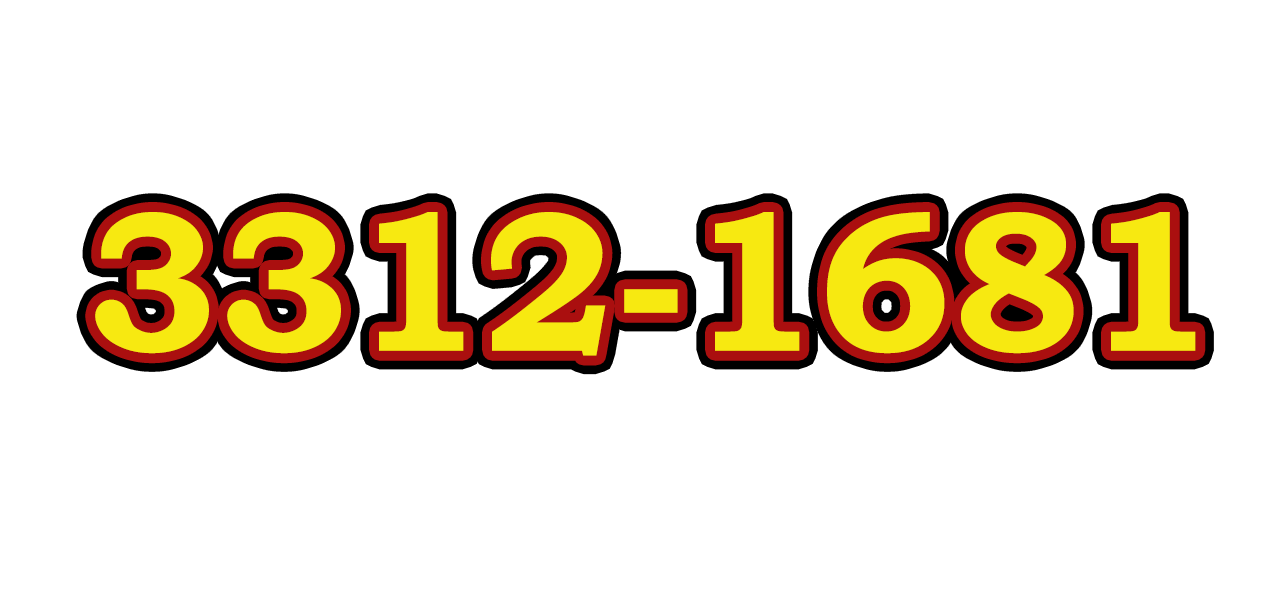
<style>
.page{position:relative;width:1270px;height:604px;background:#ffffff}
.page>*{position:absolute;margin:0}
.t1{font:200px "BookmanOldStyle-Bold";color:#f7e911}
</style>
<div class="page">
<p class="t1" style="left:95px;top:212px;width:1101px;height:144px">3312-1681</p>
</div>
